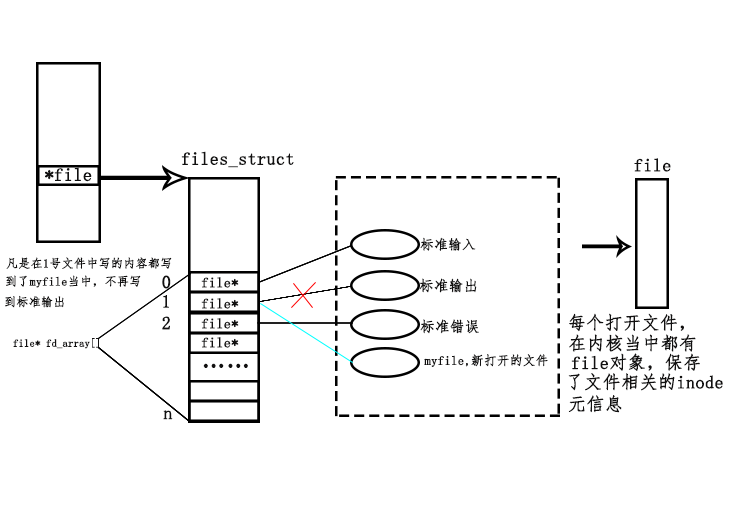
<style>
.page{position:relative;width:738px;height:510px;background:#ffffff}
.page>*{position:absolute;margin:0}
.t1{font:18px "FangSong";color:#111010;font-weight:bold}
.t2{font:18.2px "FangSong";color:#111010;font-weight:bold}
.t3{font:13.6px "FangSong";color:#111010;font-weight:bold}
.t4{font:12px "FangSong";color:#111010;font-weight:bold}
.t5{font:14.1px "FangSong";color:#111010;font-weight:bold}
.t6{font:14.5px "FangSong";color:#111010;font-weight:bold}
.t7{font:14.6px "FangSong";color:#111010;font-weight:bold}
.t8{font:10.5px "FangSong";color:#111010;font-weight:bold}
.t9{font:24px "FangSong";color:#111010;font-weight:bold}
.t10{font:12.6px "FangSong";color:#111010;font-weight:bold}
</style>
<div class="page">
<p class="t1" style="left:181px;top:151px;width:113px;height:17px">files_struct</p>
<p class="t1" style="left:634px;top:158px;width:37px;height:14px">file</p>
<p class="t2" style="left:45px;top:167px;width:47px;height:15px">*file</p>
<p class="t3" style="left:420px;top:237px;width:56px;height:14px">标准输入</p>
<p class="t4" style="left:6px;top:257px;width:166px;height:12px">凡是在1号文件中写的内容都写</p>
<p class="t4" style="left:6px;top:275px;width:135px;height:13px">到了myfile当中，不再写</p>
<p class="t1" style="left:162px;top:275px;width:9px;height:14px">0</p>
<p class="t5" style="left:201px;top:277px;width:38px;height:11px">file*</p>
<p class="t6" style="left:419px;top:278px;width:58px;height:15px">标准输出</p>
<p class="t4" style="left:5px;top:295px;width:59px;height:13px">到标准输出</p>
<p class="t1" style="left:163px;top:295px;width:6px;height:13px">1</p>
<p class="t5" style="left:201px;top:298px;width:38px;height:11px">file*</p>
<p class="t1" style="left:162px;top:316px;width:8px;height:14px">2</p>
<p class="t5" style="left:201px;top:318px;width:38px;height:11px">file*</p>
<p class="t1" style="left:569px;top:313px;width:115px;height:19px">每个打开文件，</p>
<p class="t7" style="left:420px;top:319px;width:59px;height:15px">标准错误</p>
<p class="t8" style="left:13px;top:338px;width:86px;height:11px">file* fd_array[]</p>
<p class="t5" style="left:201px;top:337px;width:38px;height:11px">file*</p>
<p class="t1" style="left:569px;top:334px;width:127px;height:18px">在内核当中都有</p>
<p class="t1" style="left:571px;top:353px;width:129px;height:18px">file对象，保存</p>
<p class="t9" style="left:203px;top:363px;width:45px;height:5px">……</p>
<p class="t10" style="left:424px;top:354px;width:124px;height:13px">myfile,新打开的文件</p>
<p class="t1" style="left:568px;top:373px;width:155px;height:18px">了文件相关的inode</p>
<p class="t1" style="left:568px;top:395px;width:54px;height:18px">元信息</p>
<p class="t1" style="left:163px;top:410px;width:10px;height:10px">n</p>
</div>
